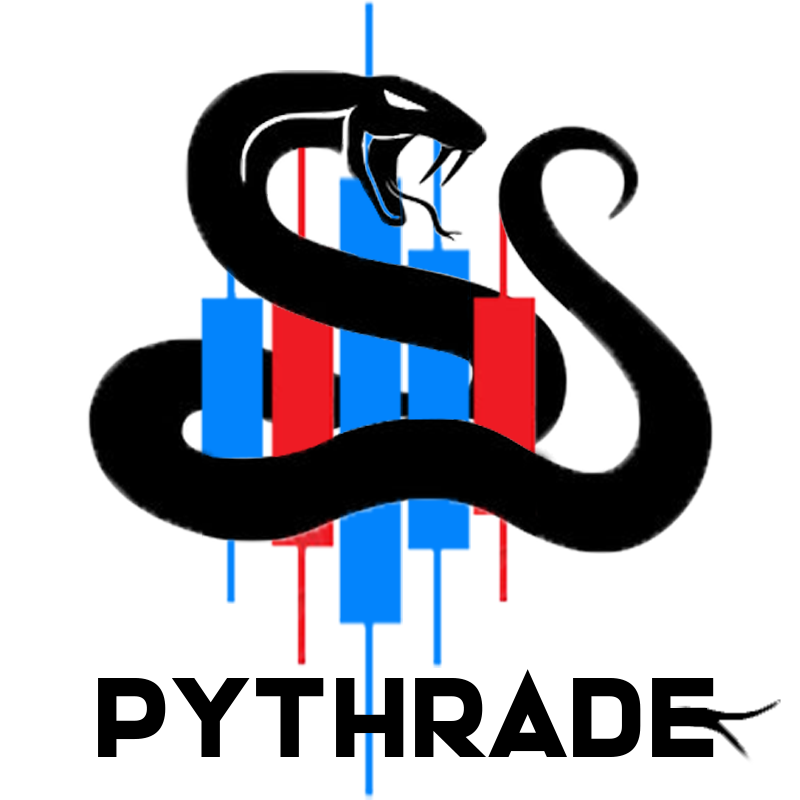
<style>
.page{position:relative;width:800px;height:800px;background:#ffffff}
.page>*{position:absolute;margin:0}
.t1{font:124.8px "Hardigan";color:#000000}
</style>
<div class="page">
<p class="t1" style="left:98px;top:669px;width:616px;height:88px">Pythrade</p>
</div>
